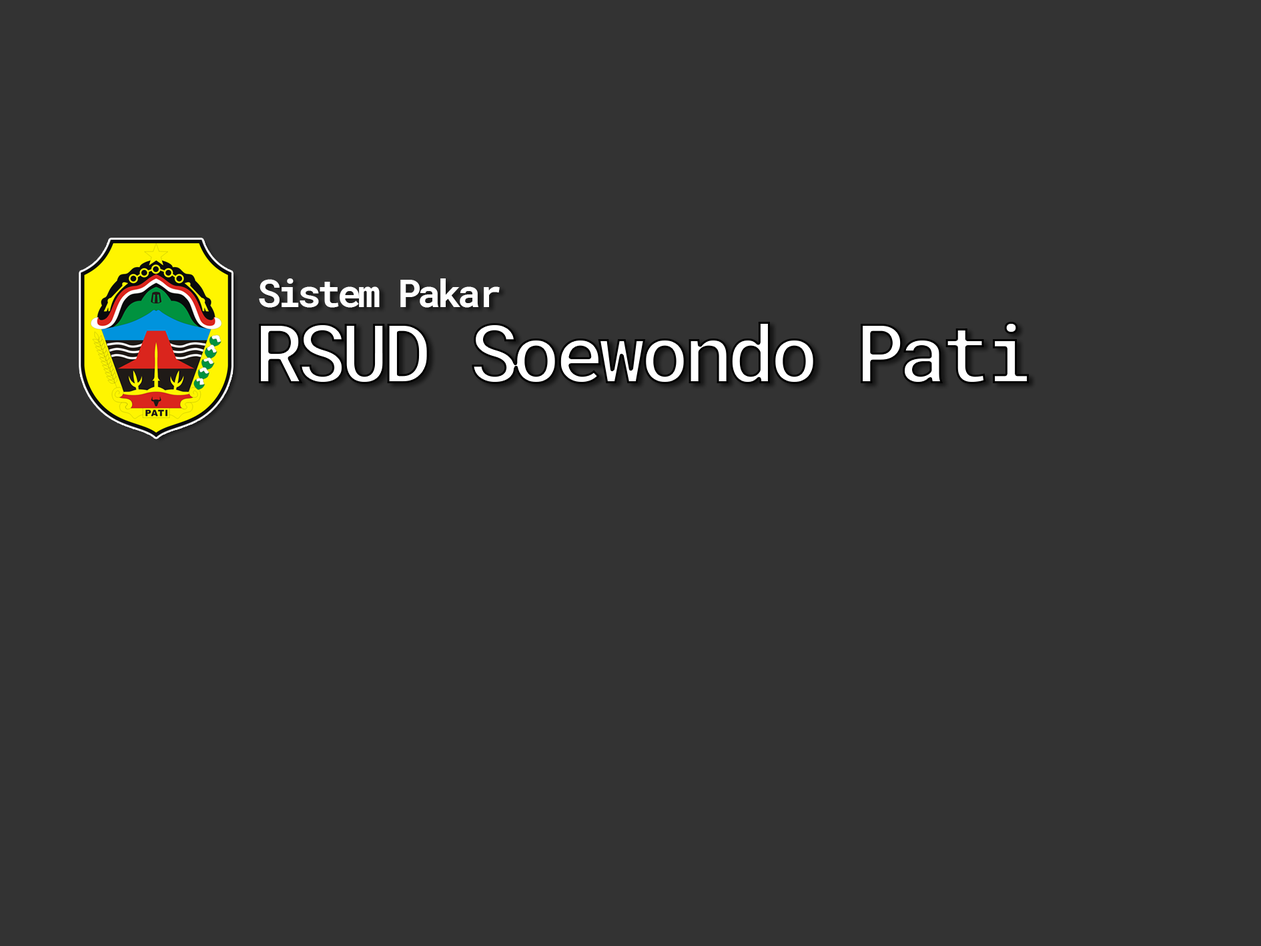
<style>
.page{position:relative;width:1261px;height:946px;background:#333333}
.page>*{position:absolute;margin:0}
.t1{font:38.9px "RobotoMono-Bold";letter-spacing:-0.085em;color:#ffffff}
.t2{font:83.4px "RobotoMono-Bold";letter-spacing:-0.085em}
</style>
<div class="page">
<p class="t1" style="left:259px;top:278px;width:241px;height:30px">Sistem Pakar</p>
<p class="t2" style="left:259px;top:322px;width:770px;height:62px">RSUD Soewondo Pati</p>
</div>
